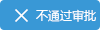
<style>
.page{position:relative;width:100px;height:30px;background:#3998d6}
.page>*{position:absolute;margin:0}
.t1{font:20px "AdobeHeitiStd-Regular";color:#ffffff}
.t2{font:12px "MicrosoftYaHei";color:#ffffff}
</style>
<div class="page">
<p class="t1" style="left:15px;top:9px;width:13px;height:13px">×</p>
<p class="t2" style="left:36px;top:9px;width:60px;height:13px">不通过审批</p>
</div>
